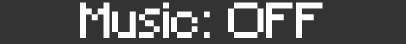
<style>
.page{position:relative;width:406px;height:44px;background:#333333}
.page>*{position:absolute;margin:0}
.t1{font:47.4px "Minecraft";color:#fdfdfc}
</style>
<div class="page">
<p class="t1" style="left:80px;top:2px;width:243px;height:36px">Music: OFF</p>
</div>
